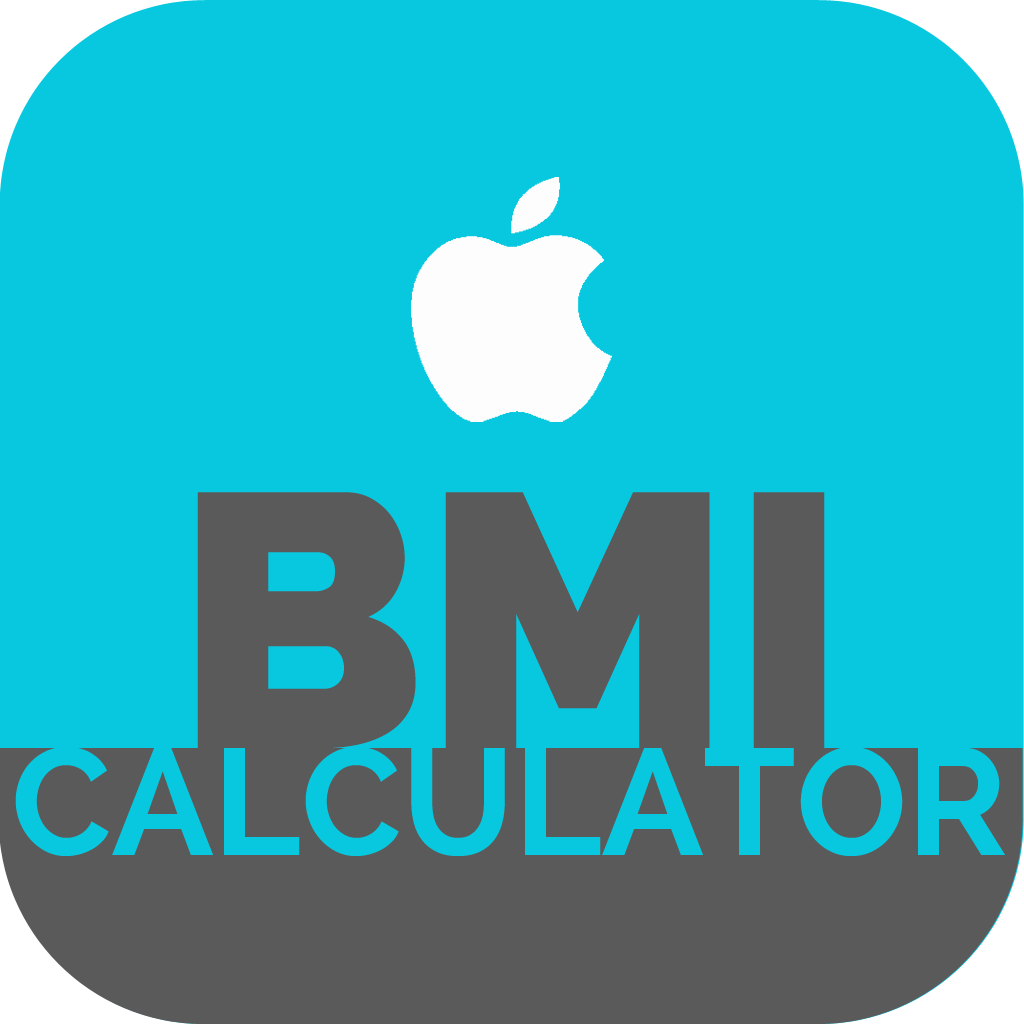
<style>
.page{position:relative;width:1024px;height:1024px;background:#07c8df}
.page>*{position:absolute;margin:0}
.t1{font:360px "Raleway-Heavy";color:#5b5a5a}
.t2{font:150px "Raleway-Bold";color:#07c8df}
</style>
<div class="page">
<p class="t1" style="left:197px;top:492px;width:628px;height:256px">BMI</p>
<p class="t2" style="left:15px;top:747px;width:990px;height:109px">CALCULATOR</p>
</div>
